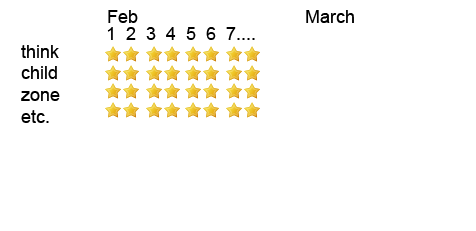
<style>
.page{position:relative;width:476px;height:231px;background:#ffffff}
.page>*{position:absolute;margin:0}
.t1{font:18px "ArialMT";color:#000000}
</style>
<div class="page">
<p class="t1" style="left:108px;top:10px;width:30px;height:13px">Feb</p>
<p class="t1" style="left:306px;top:10px;width:48px;height:13px">March</p>
<p class="t1" style="left:107px;top:27px;width:148px;height:13px">1  2  3  4  5  6  7....</p>
<p class="t1" style="left:21px;top:45px;width:39px;height:78px;text-align:justify">think<br>child<br>zone<br>etc.</p>
</div>
